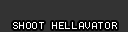
<style>
.page{position:relative;width:128px;height:32px;background:#333333}
.page>*{position:absolute;margin:0}
.t1{font:8px "Terminal";letter-spacing:0.075em;color:#ffffff}
</style>
<div class="page">
<p class="t1" style="left:13px;top:22px;width:104px;height:7px">SHOOT HELLAVATOR</p>
</div>
